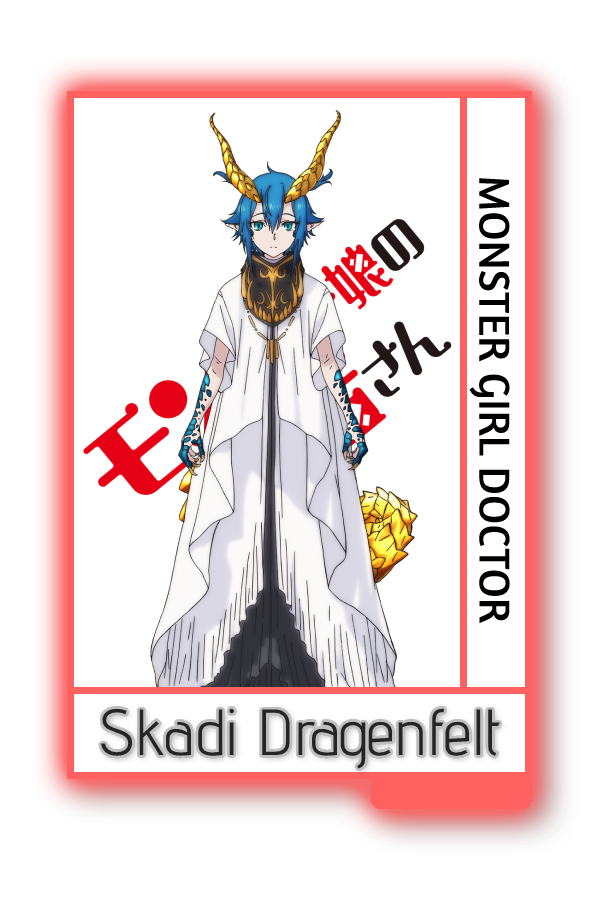
<style>
.page{position:relative;width:600px;height:900px;background:#ffffff}
.page>*{position:absolute;margin:0}
.t1{font:44px "Amaranth-Regular";color:#000000}
.t2{font:65px "AdventPro-Regular";color:#252525}
</style>
<div class="page">
<p class="t1" style="left:469px;top:178px;width:41px;height:446px;rotate:90deg">MONSTER GIRL DOCTOR</p>
<p class="t2" style="left:101px;top:708px;width:399px;height:61px">Skadi Dragenfelt</p>
</div>
